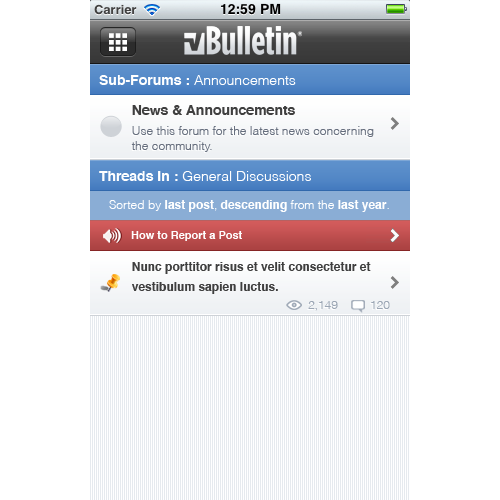
<style>
.page{position:relative;width:500px;height:500px;background:#ffffff}
.page>*{position:absolute;margin:0}
.t1{font:14px "Helvetica-Light";color:#ffffff}
.t2{font:14px "Helvetica-Bold";color:#ffffff}
.t3{font:14px "Helvetica-Bold"}
.t4{font:14px "Helvetica-Bold";color:#3f3f3f}
.t5{font:12px "Helvetica-Light";color:#676f7e}
.t6{font:12px "Helvetica-Bold";color:#ffffff}
.t7{font:12px "Helvetica-Light";color:#ffffff}
.t8{font:11px "Helvetica-Bold";color:#ffffff}
.t9{font:12px/19.8px "Helvetica-Bold";color:#3f3f3f}
.t10{font:12px "Helvetica-Light";color:#9ba6b4}
</style>
<div class="page">
<p class="t1" style="left:99px;top:75px;width:197px;height:10px"><span class="t2">Sub-Forums : </span>Announcements</p>
<p class="t3" style="left:131px;top:105px;width:163px;height:10px">News &amp; Announcements</p>
<p class="t4" style="left:132px;top:105px;width:163px;height:10px">News &amp; Announcements</p>
<p class="t5" style="left:131px;top:126px;width:243px;height:26px">Use this forum for the latest news concerning <br>the community.</p>
<p class="t1" style="left:99px;top:171px;width:212px;height:10px"><span class="t2">Threads In :</span> General Discussions</p>
<p class="t6" style="left:109px;top:200px;width:280px;height:12px"><span class="t7">Sorted by</span> last post<span class="t7">, </span>descending <span class="t7">from the </span>last year<span class="t7">.</span></p>
<p class="t8" style="left:131px;top:231px;width:111px;height:10px">How to Report a Post</p>
<p class="t9" style="left:132px;top:262px;width:239px;height:32px">Nunc porttitor risus et velit consectetur et <br>vestibulum sapien luctus.</p>
<p class="t10" style="left:308px;top:301px;width:30px;height:10px">2,149</p>
<p class="t10" style="left:371px;top:301px;width:19px;height:8px">120</p>
</div>
